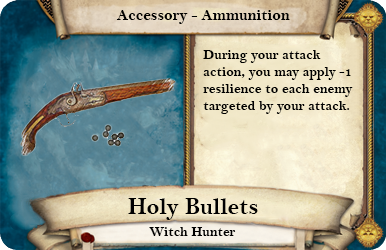
<style>
.page{position:relative;width:386px;height:250px}
.page>*{position:absolute;margin:0}
.t1{font:16px "BellMTBold";color:#000000}
.t2{font:14px "BellMTBold";color:#000000}
.t3{font:24px "BellMTBold";color:#000000}
</style>
<div class="page">
<p class="t1" style="left:116px;top:10px;width:174px;height:14px">Accessory - Ammunition</p>
<p class="t2" style="left:203px;top:50px;width:150px;height:64px">During your attack action, you may apply -1 resilience to each enemy targeted by your attack.</p>
<p class="t3" style="left:128px;top:198px;width:130px;height:22px">Holy Bullets</p>
<p class="t2" style="left:149px;top:227px;width:87px;height:9px">Witch Hunter</p>
</div>
